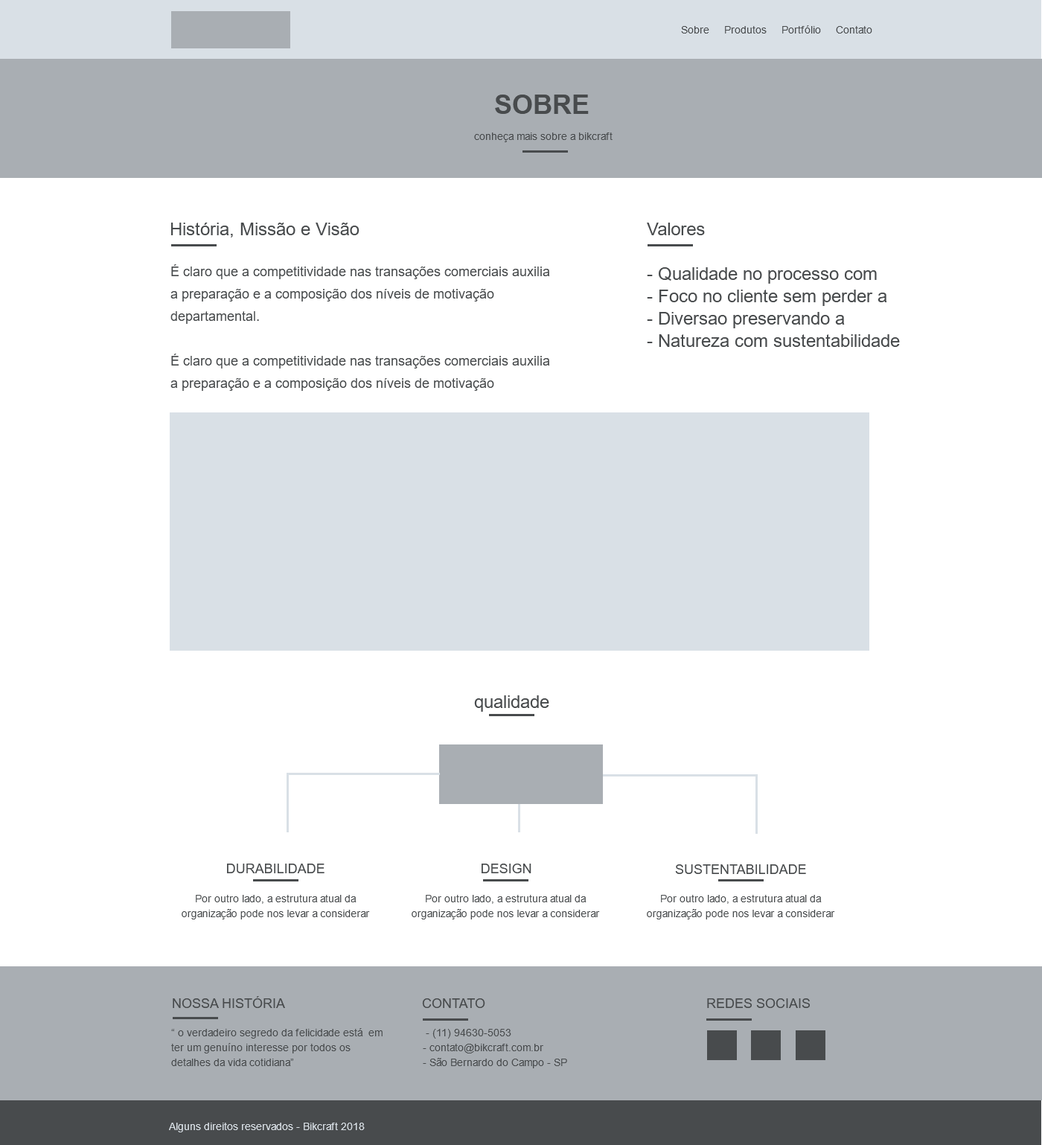
<style>
.page{position:relative;width:1042px;height:1145px;background:#ffffff}
.page>*{position:absolute;margin:0}
.t1{font:10.4px "ArialMT";color:#484b4d}
.t2{font:26.8px "Arial-BoldMT";color:#484b4d;text-transform:uppercase}
.t3{font:17.9px "ArialMT";color:#484b4d}
.t4{font:13.4px/22.3px "ArialMT";color:#484b4d}
.t5{font:17.9px/22.3px "ArialMT";color:#484b4d}
.t6{font:13.4px "ArialMT";color:#484b4d;text-transform:uppercase}
.t7{font:10.4px/14.9px "ArialMT";color:#484b4d}
.t8{font:10.4px/14.9px "ArialMT";color:#484b4d;text-transform:uppercase}
.t9{font:10.4px "ArialMT";color:#d9e0e6}
.t10{font:10.4px "ArialMT";color:#d9e0e6;text-transform:uppercase}
</style>
<div class="page">
<p class="t1" style="left:681px;top:25px;width:191px;height:8px">Sobre     Produtos     Portfólio     Contato</p>
<p class="t2" style="left:495px;top:95px;width:94px;height:19px">SOBRE</p>
<p class="t1" style="left:474px;top:132px;width:138px;height:10px">conheça mais sobre a bikcraft</p>
<p class="t3" style="left:171px;top:223px;width:188px;height:14px">História, Missão e Visão</p>
<p class="t3" style="left:647px;top:223px;width:58px;height:12px">Valores</p>
<p class="t4" style="left:170px;top:264px;width:380px;height:127px">É claro que a competitividade nas transações comerciais auxilia a preparação e a composição dos níveis de motivação departamental.<br><br>É claro que a competitividade nas transações comerciais auxilia a preparação e a composição dos níveis de motivação departamental.</p>
<p class="t5" style="left:647px;top:267px;width:253px;height:80px">- Qualidade no processo com<br>- Foco no cliente sem perder a<br>- Diversao preservando a <br>- Natureza com sustentabilidade</p>
<p class="t3" style="left:474px;top:695px;width:75px;height:16px">qualidade</p>
<p class="t6" style="left:227px;top:863px;width:97px;height:10px">DURABILIDADE</p>
<p class="t6" style="left:481px;top:863px;width:50px;height:10px">DESIGN</p>
<p class="t6" style="left:675px;top:864px;width:131px;height:10px">SUSTENTABILIDADE</p>
<p class="t7" style="left:182px;top:894px;width:188px;height:25px;text-align:center">Por outro lado, a estrutura atual da organização pode nos levar a considerar <span class="t8">.</span></p>
<p class="t7" style="left:412px;top:894px;width:188px;height:25px;text-align:center">Por outro lado, a estrutura atual da organização pode nos levar a considerar <span class="t8">.</span></p>
<p class="t7" style="left:647px;top:894px;width:188px;height:25px;text-align:center">Por outro lado, a estrutura atual da organização pode nos levar a considerar <span class="t8">.</span></p>
<p class="t6" style="left:173px;top:996px;width:112px;height:12px">Nossa história</p>
<p class="t6" style="left:422px;top:998px;width:63px;height:10px">Contato</p>
<p class="t6" style="left:707px;top:998px;width:103px;height:10px">redes sociais</p>
<p class="t7" style="left:171px;top:1028px;width:212px;height:38px">“ o verdadeiro segredo da felicidade está  em <br>ter um genuíno interesse por todos os <br>detalhes da vida cotidiana”</p>
<p class="t7" style="left:423px;top:1028px;width:144px;height:40px">- (11) 94630-5053<br>- contato@bikcraft.com.br<br>- São Bernardo do Campo - SP</p>
<p class="t9" style="left:169px;top:1122px;width:196px;height:10px"><span class="t10">A</span>lguns direitos reservados - Bikcraft 2018</p>
</div>
